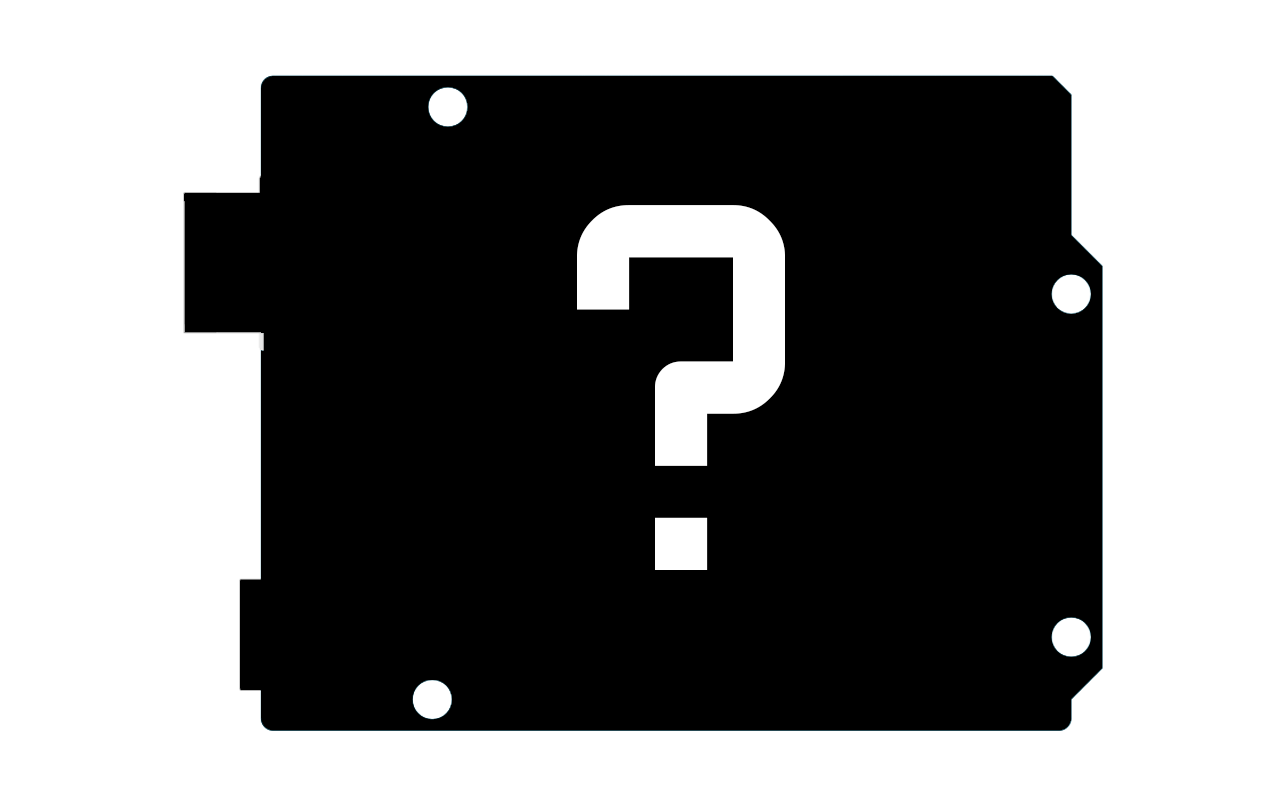
<style>
.page{position:relative;width:1280px;height:800px;background:#000000}
.page>*{position:absolute;margin:0}
.t1{font:416.9px "Manteka";color:#ffffff}
</style>
<div class="page">
<p class="t1" style="left:577px;top:205px;width:208px;height:365px">?</p>
</div>
